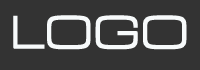
<style>
.page{position:relative;width:200px;height:70px;background:#333333}
.page>*{position:absolute;margin:0}
.t1{font:44.6px "VDub-Regular";color:#f7fafb}
</style>
<div class="page">
<p class="t1" style="left:13px;top:15px;width:174px;height:35px">LOGO</p>
</div>
